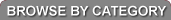
<style>
.page{position:relative;width:171px;height:20px;background:#858585}
.page>*{position:absolute;margin:0}
.t1{font:13.3px "Arial-BoldMT";color:#ffffff}
</style>
<div class="page">
<p class="t1" style="left:7px;top:5px;width:159px;height:11px">BROWSE BY CATEGORY</p>
</div>
